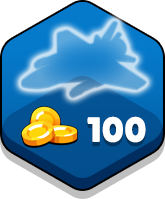
<style>
.page{position:relative;width:165px;height:199px;background:#ffffff}
.page>*{position:absolute;margin:0}
.t1{font:35.5px "LilitaOne";color:#ffffff}
</style>
<div class="page">
<p class="t1" style="left:87px;top:116px;width:59px;height:27px">100</p>
</div>
